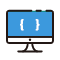
<style>
.page{position:relative;width:60px;height:60px;background:#ffffff}
.page>*{position:absolute;margin:0}
.t1{font:12px "Teko-Bold";color:#ffffff}
</style>
<div class="page">
<p class="t1" style="left:20px;top:19px;width:20px;height:12px">{     }</p>
</div>
